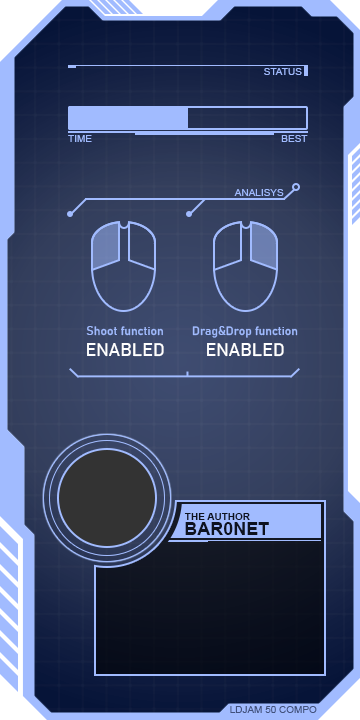
<style>
.page{position:relative;width:360px;height:720px}
.page>*{position:absolute;margin:0}
.t1{font:10px "ArialMT";color:#a1bbff}
.t2{font:10.1px "ArialMT";color:#a1bbff}
.t3{font:12px "Bahnschrift";color:#a1bbff}
.t4{font:18px "Bahnschrift";color:#ffffff}
.t5{font:10px "Arial-BoldMT";color:#0e121f}
.t6{font:18px "Arial-BoldMT";color:#0e121f}
.t7{font:10px "ArialMT";color:#41517c}
</style>
<div class="page">
<p class="t1" style="left:264px;top:68px;width:38px;height:7px">STATUS</p>
<p class="t2" style="left:68px;top:135px;width:24px;height:7px">TIME</p>
<p class="t1" style="left:281px;top:135px;width:27px;height:7px">BEST</p>
<p class="t1" style="left:234px;top:189px;width:50px;height:7px">ANALISYS</p>
<p class="t3" style="left:86px;top:326px;width:78px;height:31px;text-align:center">Shoot function<br><span class="t4">ENABLED</span></p>
<p class="t3" style="left:192px;top:326px;width:106px;height:31px;text-align:center">Drag&amp;Drop function<br><span class="t4">ENABLED</span></p>
<p class="t5" style="left:184px;top:513px;width:66px;height:7px">THE AUTHOR</p>
<p class="t6" style="left:185px;top:522px;width:84px;height:13px">BAR0NET</p>
<p class="t7" style="left:230px;top:706px;width:87px;height:7px">LDJAM 50 COMPO</p>
</div>
